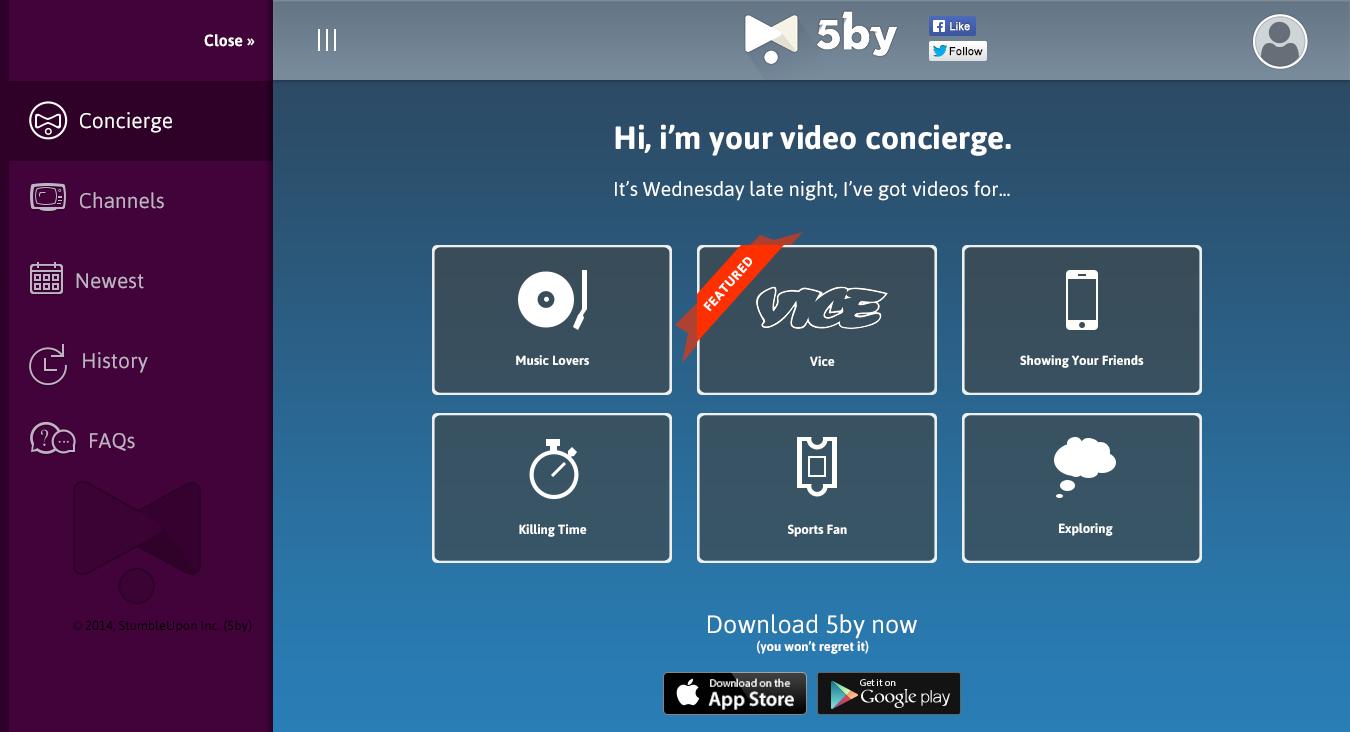
<style>
.page{position:relative;width:1350px;height:732px}
.page>*{position:absolute;margin:0}
.t1{font:11px "ArialMT";color:#fffff9;font-weight:bold}
.t2{font:16px "Asap-Bold";color:#ffffff}
.t3{font:11px "ArialMT";color:#000000;font-weight:bold}
.t4{font:21px "Asap-Regular";color:#ffffff}
.t5{font:32px "Asap-Bold";color:#ffffff}
.t6{font:20px "Asap-Regular";color:#ffffff}
.t7{font:21px "Asap-Regular";color:#c0b4c4}
.t8{font:13px "Asap-Bold";letter-spacing:0.06em;color:#ffffff}
.t9{font:13px "Asap-Bold";color:#ffffff}
.t10{font:25px "Asap-Regular";color:#ffffff}
.t11{font:13px "Asap-Regular";color:#000000}
.t12{font:11px/18.8px "MyriadPro-Regular";color:#ffffff}
.t13{font:19.9px/18.8px "MyriadPro-Semibold";color:#ffffff}
.t14{font:10px "MyriadPro-Regular";color:#ffffff}
</style>
<div class="page">
<p class="t1" style="left:950px;top:22px;width:20px;height:9px">Like</p>
<p class="t2" style="left:204px;top:34px;width:51px;height:13px">Close »</p>
<p class="t3" style="left:949px;top:47px;width:34px;height:9px">Follow</p>
<p class="t4" style="left:80px;top:112px;width:92px;height:21px">Concierge</p>
<p class="t5" style="left:615px;top:124px;width:396px;height:32px">Hi, i’m your video concierge.</p>
<p class="t6" style="left:615px;top:180px;width:395px;height:21px">It’s Wednesday late night, I’ve got videos for...</p>
<p class="t7" style="left:80px;top:192px;width:84px;height:17px">Channels</p>
<p class="t8" style="left:703px;top:257px;width:49px;height:55px;rotate:-49deg">FEATURED</p>
<p class="t7" style="left:76px;top:273px;width:68px;height:16px">Newest</p>
<p class="t7" style="left:83px;top:352px;width:65px;height:21px">History</p>
<p class="t9" style="left:516px;top:355px;width:73px;height:10px">Music Lovers</p>
<p class="t9" style="left:810px;top:356px;width:25px;height:10px">Vice</p>
<p class="t9" style="left:1020px;top:355px;width:124px;height:13px">Showing Your Friends</p>
<p class="t7" style="left:90px;top:433px;width:45px;height:18px">FAQs</p>
<p class="t9" style="left:519px;top:524px;width:68px;height:13px">Killing Time</p>
<p class="t9" style="left:787px;top:524px;width:60px;height:13px">Sports Fan</p>
<p class="t9" style="left:1059px;top:523px;width:54px;height:13px">Exploring</p>
<p class="t10" style="left:708px;top:614px;width:209px;height:25px">Download 5by now</p>
<p class="t11" style="left:72px;top:619px;width:180px;height:14px">© 2014, StumbleUpon Inc. (5by)</p>
<p class="t9" style="left:757px;top:640px;width:112px;height:14px">(you won’t regret it)</p>
<p class="t12" style="left:708px;top:678px;width:86px;height:32px">Download on the<br><span class="t13">App Store</span></p>
<p class="t14" style="left:860px;top:679px;width:36px;height:7px">Get it on</p>
</div>
